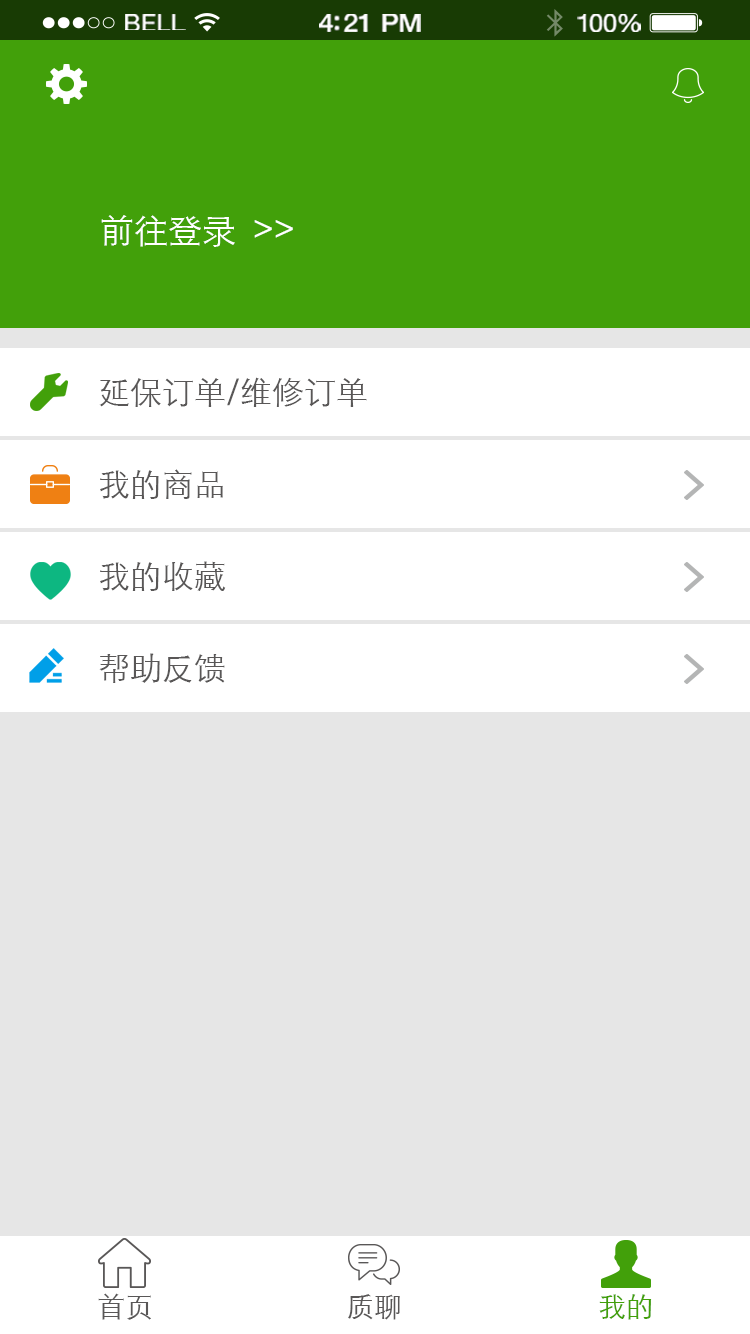
<style>
.page{position:relative;width:750px;height:1334px;background:#e6e6e6}
.page>*{position:absolute;margin:0}
.t1{font:23.3px "HelveticaNeue";letter-spacing:0.02em;color:#ffffff;scale:1.06 1}
.t2{font:25.3px "HelveticaNeue-Medium";letter-spacing:-0.02em;color:#ffffff;scale:1.06 1}
.t3{font:24.3px "HelveticaNeue";letter-spacing:-0.02em;color:#ffffff;scale:1.06 1}
.t4{font:34px "STXihei";color:#ffffff}
.t5{font:32px "STXihei";color:#595757}
.t6{font:28px "STXihei";color:#595757}
.t7{font:28px "STXihei";color:#42a00a}
</style>
<div class="page">
<p class="t1" style="left:125px;top:14px;width:61px;height:16px">BELL</p>
<p class="t2" style="left:319px;top:14px;width:102px;height:18px">4:21 PM</p>
<p class="t3" style="left:577px;top:14px;width:64px;height:18px">100%</p>
<p class="t4" style="left:101px;top:215px;width:192px;height:32px">前往登录  &gt;&gt;</p>
<p class="t5" style="left:99px;top:377px;width:268px;height:30px">延保订单/维修订单</p>
<p class="t5" style="left:100px;top:469px;width:123px;height:30px">我的商品</p>
<p class="t5" style="left:100px;top:561px;width:126px;height:30px">我的收藏</p>
<p class="t5" style="left:99px;top:653px;width:126px;height:30px">帮助反馈</p>
<p class="t6" style="left:98px;top:1293px;width:53px;height:27px">首页</p>
<p class="t6" style="left:348px;top:1294px;width:52px;height:26px">质聊</p>
<p class="t7" style="left:599px;top:1294px;width:53px;height:26px">我的</p>
</div>
